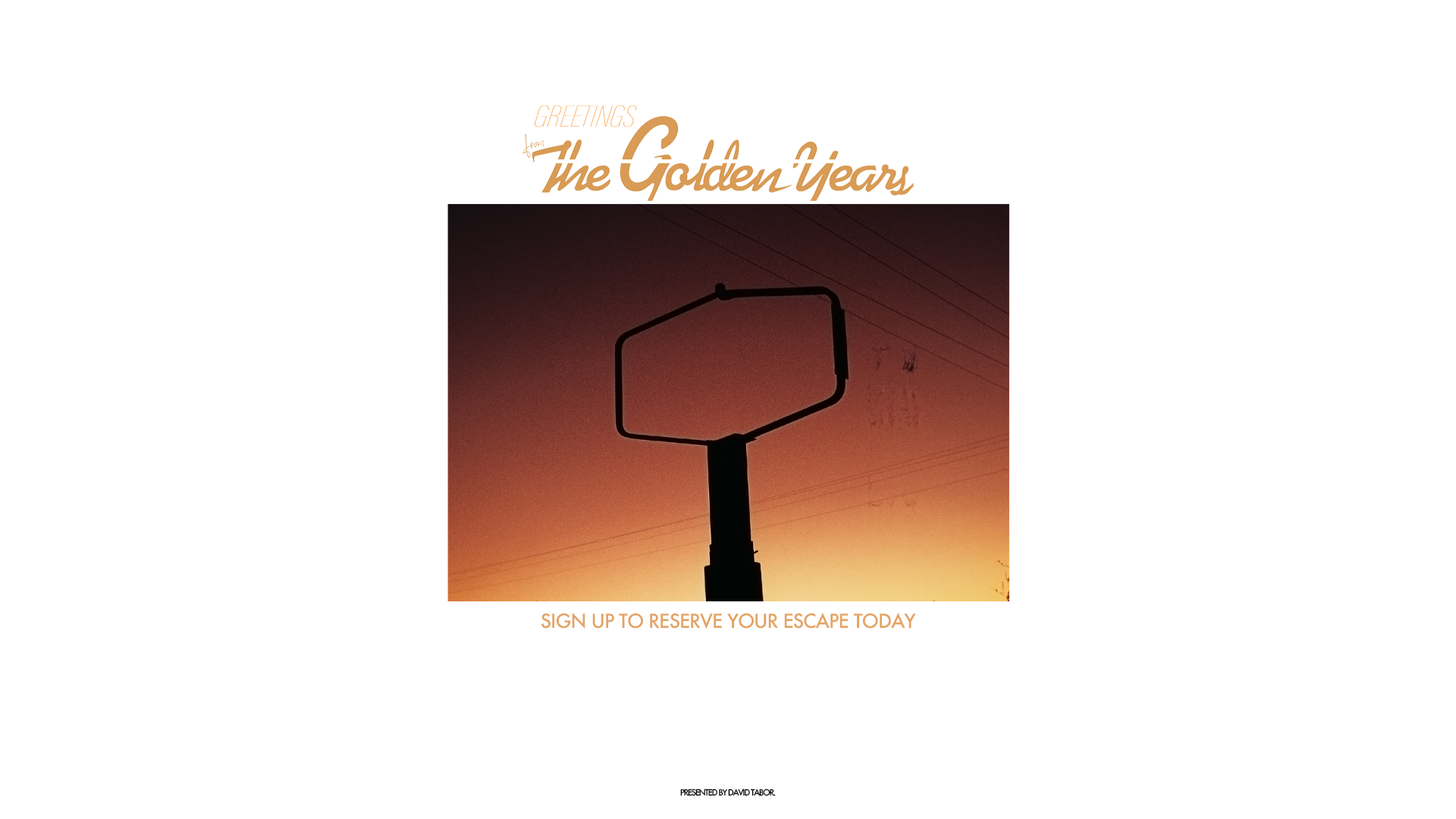
<style>
.page{position:relative;width:1456px;height:819px;background:#ffffff}
.page>*{position:absolute;margin:0}
.t1{font:19px "Futura-Medium";letter-spacing:-0.04em;color:#e4a463}
.t2{font:8.3px "Futura-Medium";letter-spacing:-0.12em;color:#000000}
</style>
<div class="page">
<p class="t1" style="left:541px;top:613px;width:375px;height:16px">SIGN UP TO RESERVE YOUR ESCAPE TODAY</p>
<p class="t2" style="left:680px;top:789px;width:96px;height:7px">PRESENTED BY DAVID TABOR.</p>
</div>
